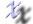
<style>
.page{position:relative;width:33px;height:24px;background:#ffffff}
.page>*{position:absolute;margin:0}
.t1{font:48px "BrushScriptMT"}
</style>
<div class="page">
<p class="t1" style="left:5px;top:0px;width:16px;height:19px">x</p>
</div>
